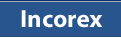
<style>
.page{position:relative;width:121px;height:38px;background:#28558d}
.page>*{position:absolute;margin:0}
.t1{font:25px "MyriadPro-Bold";color:#ffffff}
</style>
<div class="page">
<p class="t1" style="left:21px;top:10px;width:82px;height:18px">Incorex</p>
</div>
